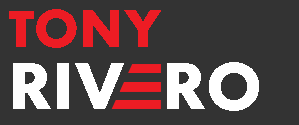
<style>
.page{position:relative;width:299px;height:125px;background:#333333}
.page>*{position:absolute;margin:0}
.t1{font:48px "FuturaMaxiCGBold";color:#ed1c24}
.t2{font:60px "FuturaMaxiCGBold";color:#ffffff}
</style>
<div class="page">
<p class="t1" style="left:9px;top:9px;width:152px;height:39px">TONY</p>
<p class="t2" style="left:13px;top:62px;width:246px;height:49px">RIV  RO</p>
</div>
